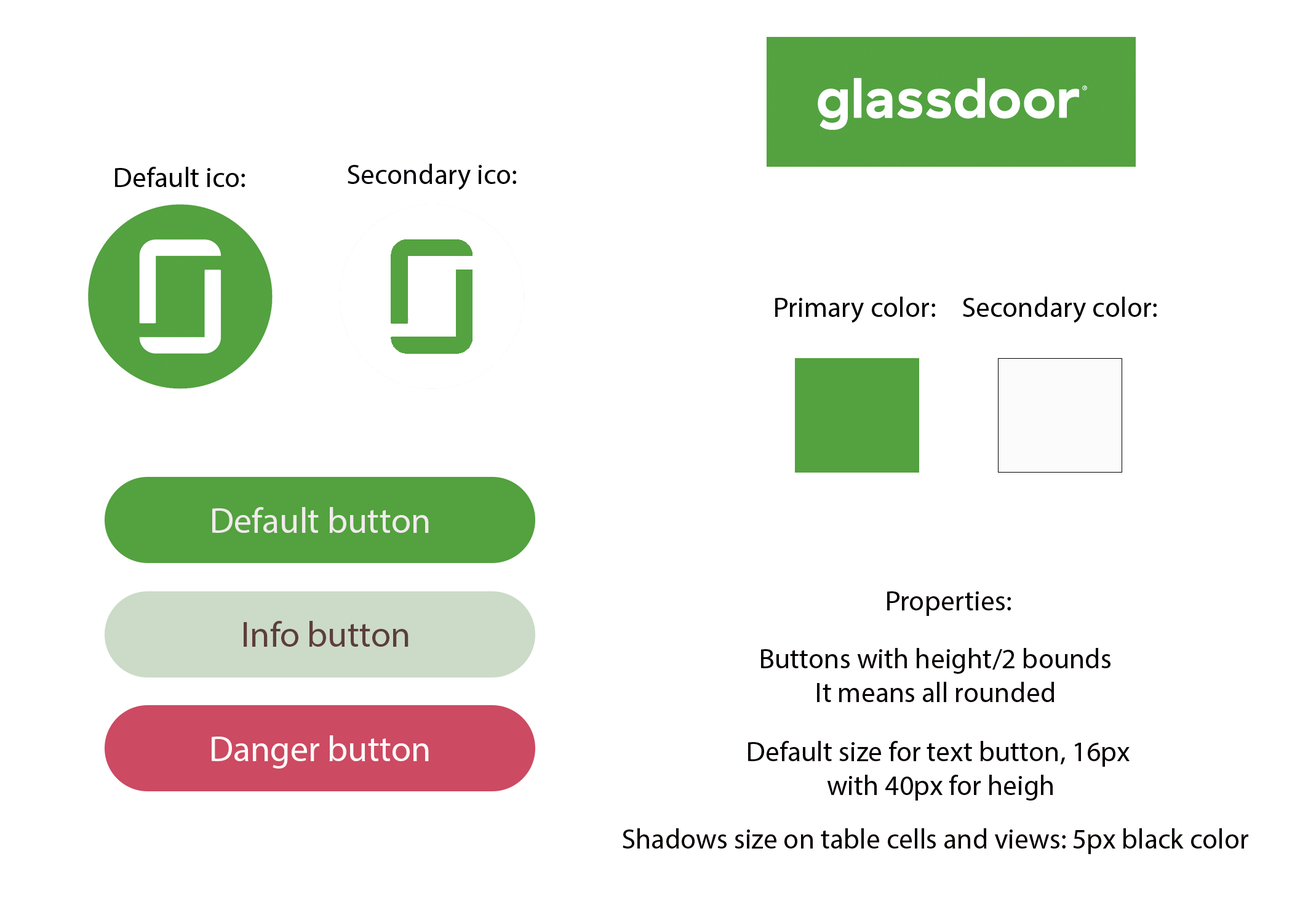
<style>
.page{position:relative;width:1292px;height:923px;background:#ffffff}
.page>*{position:absolute;margin:0}
.t1{font:28.2px "MyriadPro-Regular";color:#000000}
.t2{font:28.2px "MyriadPro-Regular";color:#000106}
.t3{font:35.9px "MyriadPro-Regular";color:#f0ebeb}
.t4{font:28.2px "MyriadPro-Regular";color:#060000}
.t5{font:35.9px "MyriadPro-Regular";color:#5d3d3d}
.t6{font:35.9px "MyriadPro-Regular";color:#fff9f9}
</style>
<div class="page">
<p class="t1" style="left:115px;top:167px;width:130px;height:20px">Default ico:</p>
<p class="t2" style="left:348px;top:164px;width:168px;height:26px">Secondary ico:</p>
<p class="t1" style="left:775px;top:297px;width:160px;height:26px">Primary color:</p>
<p class="t1" style="left:963px;top:297px;width:194px;height:26px">Secondary color:</p>
<p class="t3" style="left:212px;top:507px;width:217px;height:26px">Default button</p>
<p class="t4" style="left:887px;top:591px;width:124px;height:25px">Properties:</p>
<p class="t5" style="left:244px;top:621px;width:165px;height:26px">Info button</p>
<p class="t4" style="left:761px;top:648px;width:350px;height:54px;text-align:center">Buttons with height/2 bounds<br>It means all rounded</p>
<p class="t6" style="left:212px;top:735px;width:217px;height:33px">Danger button</p>
<p class="t4" style="left:748px;top:741px;width:382px;height:59px;text-align:center">Default size for text button, 16px <br>with 40px for heigh</p>
<p class="t4" style="left:623px;top:828px;width:625px;height:26px">Shadows size on table cells and views: 5px black color</p>
</div>
